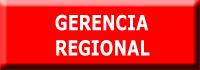
<style>
.page{position:relative;width:200px;height:70px;background:#ff0000}
.page>*{position:absolute;margin:0}
.t1{font:21px "Verdana-Bold";color:#ffffff;scale:0.76 1}
</style>
<div class="page">
<p class="t1" style="left:55px;top:14px;width:95px;height:42px">GERENCIA <br>REGIONAL</p>
</div>
